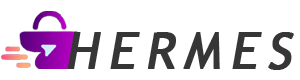
<style>
.page{position:relative;width:300px;height:80px;background:#ffffff}
.page>*{position:absolute;margin:0}
.t1{font:49.5px "TrebuchetMS";letter-spacing:0.2em;color:#363636;font-weight:bold;font-style:italic}
</style>
<div class="page">
<p class="t1" style="left:67px;top:32px;width:227px;height:38px">HERMES</p>
</div>
